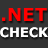
<style>
.page{position:relative;width:48px;height:48px;background:#333333}
.page>*{position:absolute;margin:0}
.t1{font:13px "Verdana-Bold";color:#ffffff}
.t2{font:14px "Verdana-Bold";color:#ff0000}
.t3{font:18px "Verdana-Bold";color:#ff0000}
</style>
<div class="page">
<p class="t1" style="left:0px;top:8px;width:48px;height:30px;text-align:center"><span class="t2"><br></span><span class="t3">.NET<br></span>CHECK</p>
</div>
